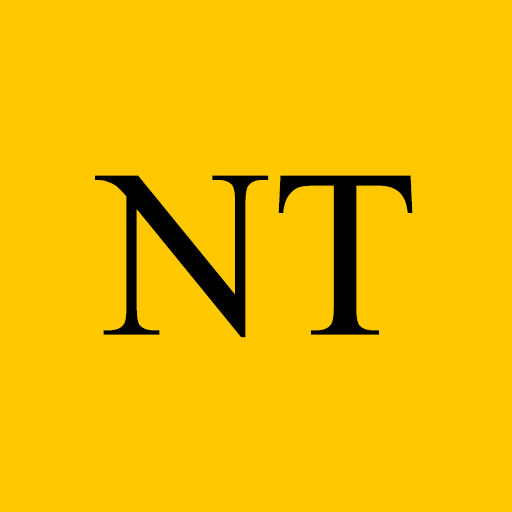
<style>
.page{position:relative;width:512px;height:512px;background:#ffc800}
.page>*{position:absolute;margin:0}
.t1{font:240px "TimesNewRomanPSMT";color:#000000}
</style>
<div class="page">
<p class="t1" style="left:95px;top:175px;width:318px;height:163px">NT</p>
</div>
